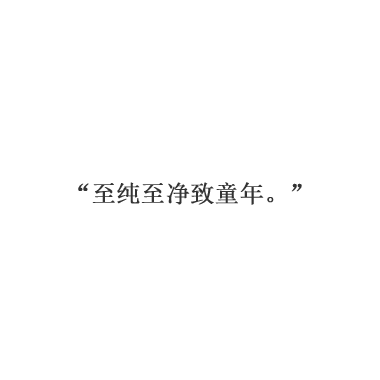
<style>
.page{position:relative;width:380px;height:380px;background:#ffffff}
.page>*{position:absolute;margin:0}
.t1{font:24px "NSimSun";color:#333333;font-weight:bold}
</style>
<div class="page">
<p class="t1" style="left:78px;top:182px;width:224px;height:23px">“至纯至净致童年。”</p>
</div>
